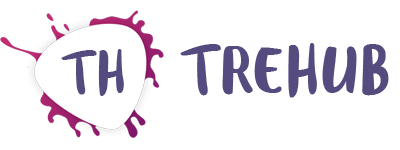
<style>
.page{position:relative;width:400px;height:150px;background:#ffffff}
.page>*{position:absolute;margin:0}
.t1{font:48px "SVN-BlogScript";color:#554b7e}
.t2{font:55px "SVN-BlogScript";color:#554b7e}
</style>
<div class="page">
<p class="t1" style="left:61px;top:49px;width:63px;height:47px">TH</p>
<p class="t2" style="left:180px;top:43px;width:209px;height:55px">TREHUB</p>
</div>
